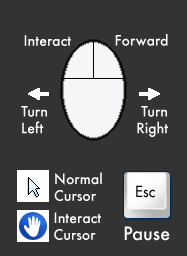
<style>
.page{position:relative;width:187px;height:256px;background:#333333}
.page>*{position:absolute;margin:0}
.t1{font:14px "Futura-Medium";color:#ffffff}
.t2{font:15px "Futura";letter-spacing:0.01em;color:#000000}
.t3{font:18px "Futura-Medium";color:#ffffff}
</style>
<div class="page">
<p class="t1" style="left:24px;top:35px;width:47px;height:11px">Interact</p>
<p class="t1" style="left:115px;top:34px;width:53px;height:12px">Forward</p>
<p class="t1" style="left:21px;top:106px;width:26px;height:28px">Turn<br>Left</p>
<p class="t1" style="left:137px;top:106px;width:31px;height:31px;text-align:right">Turn<br>Right</p>
<p class="t1" style="left:54px;top:172px;width:48px;height:29px">Normal<br>Cursor</p>
<p class="t2" style="left:136px;top:185px;width:19px;height:13px">Esc</p>
<p class="t1" style="left:54px;top:212px;width:47px;height:28px">Interact<br>Cursor</p>
<p class="t3" style="left:124px;top:226px;width:46px;height:15px">Pause</p>
</div>
